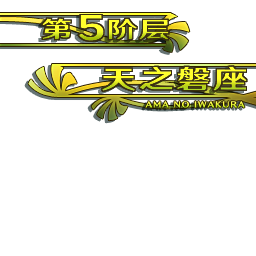
<style>
.page{position:relative;width:256px;height:256px;background:#ffffff}
.page>*{position:absolute;margin:0}
.t1{font:34.7px "HYWenHei-HEW";letter-spacing:0.052em;scale:1.36 1}
.t2{font:22.7px "HYWenHei-HEW";letter-spacing:0.052em;color:#feff2d;scale:1.36 1}
.t3{font:26.4px "HYWenHei-HEW";letter-spacing:0.057em;scale:1.33 1}
</style>
<div class="page">
<p class="t1" style="left:78px;top:15px;width:26px;height:26px">5</p>
<p class="t2" style="left:42px;top:18px;width:127px;height:22px">第   阶层</p>
<p class="t3" style="left:102px;top:66px;width:145px;height:25px">天之磐座</p>
</div>
